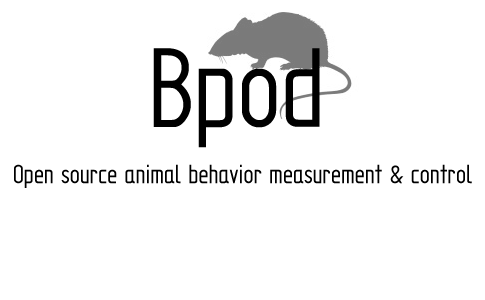
<style>
.page{position:relative;width:485px;height:300px;background:#ffffff}
.page>*{position:absolute;margin:0}
.t1{font:125px "SolidEdgeISOBold";color:#000000}
.t2{font:29.2px "SolidEdgeISOBold";color:#000000}
</style>
<div class="page">
<p class="t1" style="left:153px;top:48px;width:167px;height:100px">Bpod</p>
<p class="t2" style="left:14px;top:164px;width:458px;height:24px">Open source animal behavior measurement &amp; control</p>
</div>
